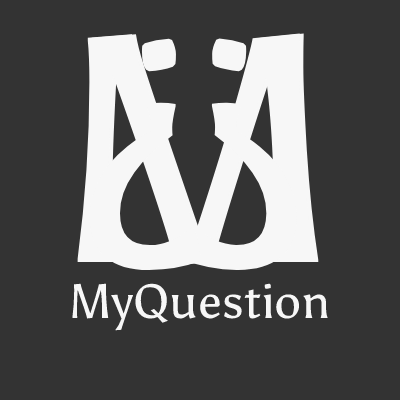
<style>
.page{position:relative;width:400px;height:400px;background:#333333}
.page>*{position:absolute;margin:0}
.t1{font:319.6px "Asul-Regular";color:#f7f7f7}
.t2{font:48px "Asul-Regular";color:#f7f7f7}
</style>
<div class="page">
<p class="t1" style="left:77px;top:33px;width:238px;height:232px">M</p>
<p class="t1" style="left:81px;top:33px;width:238px;height:232px">M</p>
<p class="t1" style="left:89px;top:38px;width:112px;height:232px;rotate:180deg">?</p>
<p class="t1" style="left:185px;top:38px;width:112px;height:232px;rotate:1deg">?</p>
<p class="t2" style="left:72px;top:283px;width:256px;height:48px">MyQuestion</p>
</div>
